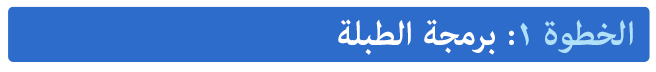
<style>
.page{position:relative;width:656px;height:72px;background:#2d6ccb}
.page>*{position:absolute;margin:0}
.t1{font:48px "AdobeArabic-Bold";color:#ffffff}
.t2{font:48px "AdobeArabic-Bold";color:#b0e1f9}
</style>
<div class="page">
<p class="t1" style="left:338px;top:19px;width:295px;height:36px"><span class="t2">الخطوة ١</span>: برمجة الطبلة</p>
</div>
